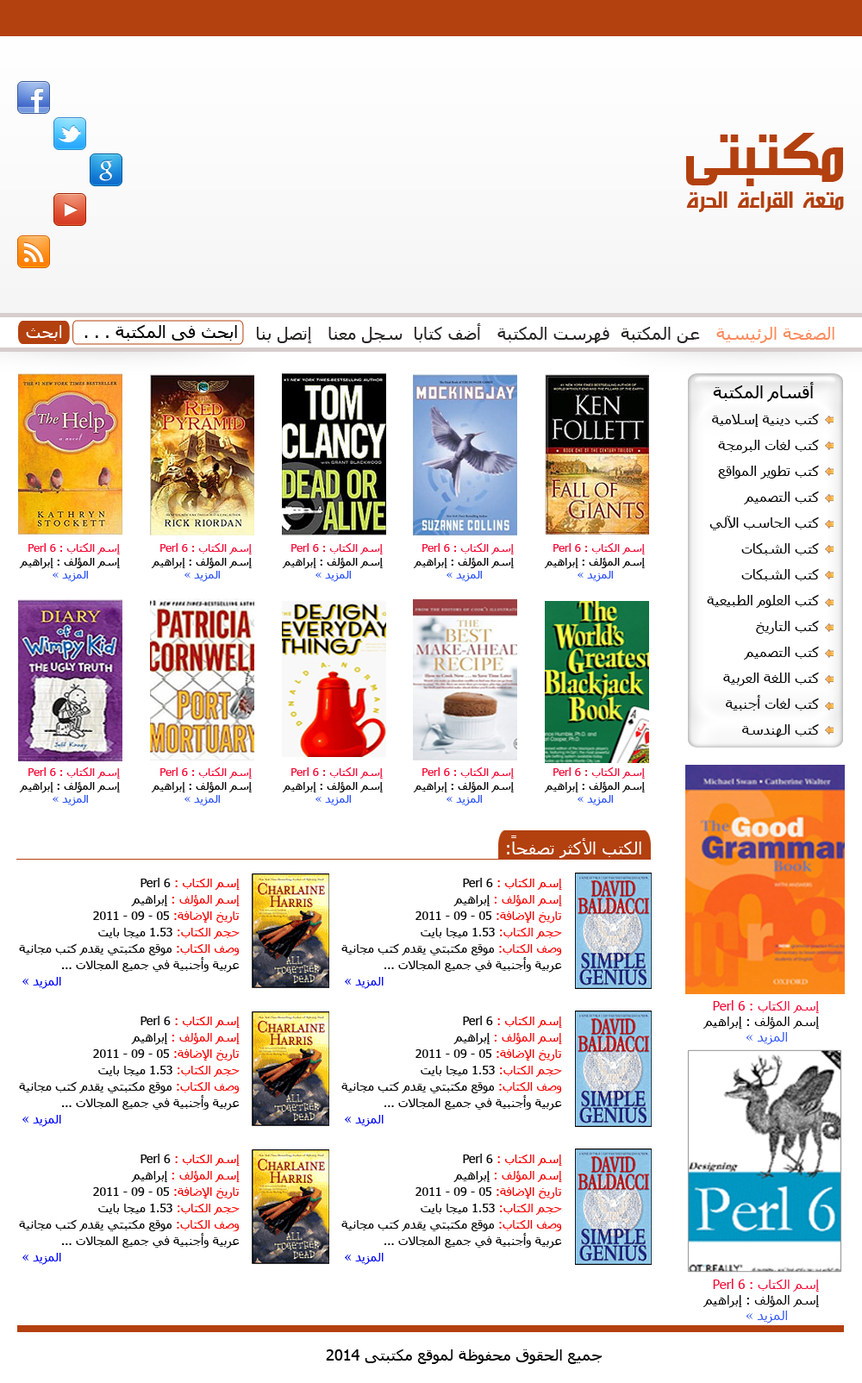
<style>
.page{position:relative;width:862px;height:1383px;background:#ffffff}
.page>*{position:absolute;margin:0}
.t1{font:71.6px "ae_AlArabiya";color:#b3400f}
.t2{font:27.6px "ae_AlArabiya";color:#b3400f}
.t3{font:17.2px "Tahoma";color:#ffffff}
.t4{font:17.2px "Tahoma";color:#000000}
.t5{font:17.2px "Tahoma";color:#272422}
.t6{font:17.2px "Tahoma";color:#f98b5d}
.t7{font:13.8px/25.9px "Tahoma";color:#000000}
.t8{font:11.2px "Tahoma";color:#000000}
.t9{font:11.2px "Tahoma";color:#f60734}
.t10{font:11.2px "Tahoma";color:#3056f9}
.t11{font:12.1px/16.4px "Tahoma";color:#080808}
.t12{font:12.1px/16.4px "Tahoma";color:#ff0000}
.t13{font:12.1px/16.4px "Tahoma";color:#fa0404}
.t14{font:12.1px/16.4px "Tahoma";color:#fd0303}
.t15{font:12.1px/16.4px "Tahoma";color:#fe0303}
.t16{font:12.1px/16.4px "Tahoma";color:#fc0101}
.t17{font:12.1px/16.4px "Tahoma";color:#040afb}
.t18{font:12.9px "Tahoma";color:#000000}
.t19{font:12.9px "Tahoma";color:#f60734}
.t20{font:12.9px "Tahoma";color:#3056f9}
.t21{font:15.5px "Tahoma";color:#000000}
</style>
<div class="page">
<p class="t1" style="left:686px;top:133px;width:157px;height:53px">مكتبتى</p>
<p class="t2" style="left:686px;top:191px;width:158px;height:21px">متعة القراءة الحرة</p>
<p class="t3" style="left:26px;top:325px;width:36px;height:16px">ابحث</p>
<p class="t4" style="left:84px;top:324px;width:153px;height:17px">ابحث فى المكتبة . . .</p>
<p class="t5" style="left:256px;top:323px;width:579px;height:20px"><span class="t6">الصفحة الرئيسية</span>   عن المكتبة  فهرست المكتبة   أضف كتابا  سجل معنا   إتصل بنا</p>
<p class="t7" style="left:707px;top:382px;width:112px;height:355px"><span class="t4"> أقسام المكتبة<br></span>كتب دينية إسلامية<br>كتب لغات البرمجة<br>كتب تطوير المواقع<br>كتب التصميم<br>كتب الحاسب الآلي<br>كتب الشبكات<br>كتب الشبكات<br>كتب العلوم الطبيعية<br>كتب التاريخ<br>كتب التصميم<br>كتب اللغة العربية<br>كتب لغات أجنبية<br>كتب الهندسة</p>
<p class="t8" style="left:19px;top:543px;width:101px;height:39px"><span class="t9">إسم الكتاب : Perl 6<br></span>إسم المؤلف : إبراهيم<br> <span class="t10">المزيد »</span></p>
<p class="t8" style="left:151px;top:543px;width:101px;height:39px"><span class="t9">إسم الكتاب : Perl 6<br></span>إسم المؤلف : إبراهيم<br> <span class="t10">المزيد »</span></p>
<p class="t8" style="left:282px;top:543px;width:101px;height:39px"><span class="t9">إسم الكتاب : Perl 6<br></span>إسم المؤلف : إبراهيم<br> <span class="t10">المزيد »</span></p>
<p class="t8" style="left:413px;top:543px;width:101px;height:39px"><span class="t9">إسم الكتاب : Perl 6<br></span>إسم المؤلف : إبراهيم<br> <span class="t10">المزيد »</span></p>
<p class="t8" style="left:544px;top:543px;width:101px;height:39px"><span class="t9">إسم الكتاب : Perl 6<br></span>إسم المؤلف : إبراهيم<br> <span class="t10">المزيد »</span></p>
<p class="t8" style="left:19px;top:767px;width:101px;height:39px"><span class="t9">إسم الكتاب : Perl 6<br></span>إسم المؤلف : إبراهيم<br> <span class="t10">المزيد »</span></p>
<p class="t8" style="left:151px;top:767px;width:101px;height:39px"><span class="t9">إسم الكتاب : Perl 6<br></span>إسم المؤلف : إبراهيم<br> <span class="t10">المزيد »</span></p>
<p class="t8" style="left:282px;top:767px;width:101px;height:39px"><span class="t9">إسم الكتاب : Perl 6<br></span>إسم المؤلف : إبراهيم<br> <span class="t10">المزيد »</span></p>
<p class="t8" style="left:413px;top:767px;width:101px;height:39px"><span class="t9">إسم الكتاب : Perl 6<br></span>إسم المؤلف : إبراهيم<br> <span class="t10">المزيد »</span></p>
<p class="t8" style="left:544px;top:767px;width:101px;height:39px"><span class="t9">إسم الكتاب : Perl 6<br></span>إسم المؤلف : إبراهيم<br> <span class="t10">المزيد »</span></p>
<p class="t3" style="left:507px;top:835px;width:134px;height:23px">الكتب الأكثر تصفحاً:</p>
<p class="t11" style="left:19px;top:878px;width:221px;height:111px"><span class="t12">إسم الكتاب :</span> Perl 6<br><span class="t13">إسم المؤلف :</span> إبراهيم<br><span class="t14">تاريخ الإضافة:</span> 05 - 09 - 2011<br><span class="t15">حجم الكتاب:</span> 1.53 ميجا بايت<br><span class="t16">وصف الكتاب:</span> موقع مكتبتي يقدم كتب مجانية <br>عربية وأجنبية في جميع المجالات ...<br><span class="t17">           المزيد »</span></p>
<p class="t11" style="left:341px;top:878px;width:221px;height:111px"><span class="t12">إسم الكتاب :</span> Perl 6<br><span class="t13">إسم المؤلف :</span> إبراهيم<br><span class="t14">تاريخ الإضافة:</span> 05 - 09 - 2011<br><span class="t15">حجم الكتاب:</span> 1.53 ميجا بايت<br><span class="t16">وصف الكتاب:</span> موقع مكتبتي يقدم كتب مجانية <br>عربية وأجنبية في جميع المجالات ...<br><span class="t17">           المزيد »</span></p>
<p class="t18" style="left:704px;top:1000px;width:115px;height:45px"><span class="t19">إسم الكتاب : Perl 6<br></span>إسم المؤلف : إبراهيم<br> <span class="t20">المزيد »</span></p>
<p class="t11" style="left:19px;top:1016px;width:221px;height:111px"><span class="t12">إسم الكتاب :</span> Perl 6<br><span class="t13">إسم المؤلف :</span> إبراهيم<br><span class="t14">تاريخ الإضافة:</span> 05 - 09 - 2011<br><span class="t15">حجم الكتاب:</span> 1.53 ميجا بايت<br><span class="t16">وصف الكتاب:</span> موقع مكتبتي يقدم كتب مجانية <br>عربية وأجنبية في جميع المجالات ...<br><span class="t17">           المزيد »</span></p>
<p class="t11" style="left:341px;top:1016px;width:221px;height:111px"><span class="t12">إسم الكتاب :</span> Perl 6<br><span class="t13">إسم المؤلف :</span> إبراهيم<br><span class="t14">تاريخ الإضافة:</span> 05 - 09 - 2011<br><span class="t15">حجم الكتاب:</span> 1.53 ميجا بايت<br><span class="t16">وصف الكتاب:</span> موقع مكتبتي يقدم كتب مجانية <br>عربية وأجنبية في جميع المجالات ...<br><span class="t17">           المزيد »</span></p>
<p class="t11" style="left:19px;top:1154px;width:221px;height:111px"><span class="t12">إسم الكتاب :</span> Perl 6<br><span class="t13">إسم المؤلف :</span> إبراهيم<br><span class="t14">تاريخ الإضافة:</span> 05 - 09 - 2011<br><span class="t15">حجم الكتاب:</span> 1.53 ميجا بايت<br><span class="t16">وصف الكتاب:</span> موقع مكتبتي يقدم كتب مجانية <br>عربية وأجنبية في جميع المجالات ...<br><span class="t17">           المزيد »</span></p>
<p class="t11" style="left:341px;top:1154px;width:221px;height:111px"><span class="t12">إسم الكتاب :</span> Perl 6<br><span class="t13">إسم المؤلف :</span> إبراهيم<br><span class="t14">تاريخ الإضافة:</span> 05 - 09 - 2011<br><span class="t15">حجم الكتاب:</span> 1.53 ميجا بايت<br><span class="t16">وصف الكتاب:</span> موقع مكتبتي يقدم كتب مجانية <br>عربية وأجنبية في جميع المجالات ...<br><span class="t17">           المزيد »</span></p>
<p class="t18" style="left:704px;top:1279px;width:115px;height:44px"><span class="t19">إسم الكتاب : Perl 6<br></span>إسم المؤلف : إبراهيم<br> <span class="t20">المزيد »</span></p>
<p class="t21" style="left:326px;top:1349px;width:276px;height:15px">جميع الحقوق محفوظة لموقع مكتبتى 2014</p>
</div>
